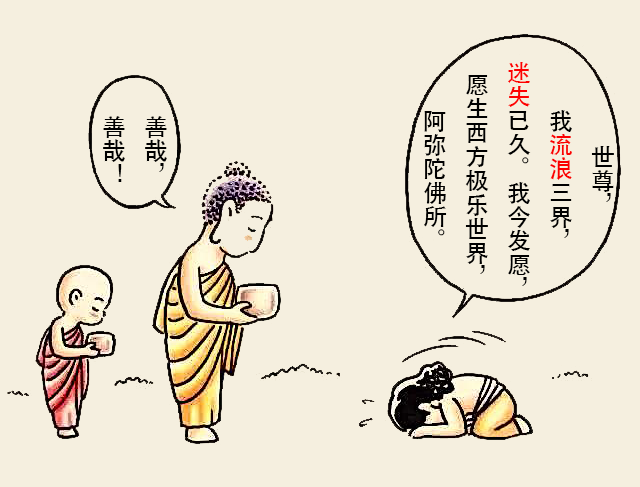
<style>
.page{position:relative;width:640px;height:487px;background:#f5efdf}
.page>*{position:absolute;margin:0}
.t1{font:24px "STHeitiSC-Medium";color:#000000}
.t2{font:24px "STHeitiSC-Medium";color:#fb0000}
.t3{font:24px "STHeitiSC-Medium";color:#fd0000}
</style>
<div class="page">
<p class="t1" style="left:424px;top:62px;width:190px;height:224px;text-align:center">世尊，<br>我<span class="t2">流浪</span>三界，<br><span class="t3">迷失</span>已久。我今发愿，愿生西方极乐世界，<br>阿弥陀佛所。</p>
<p class="t1" style="left:103px;top:116px;width:64px;height:66px;text-align:center">善哉，<br>善哉！</p>
</div>
